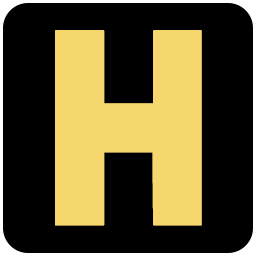
<style>
.page{position:relative;width:256px;height:256px;background:#000000}
.page>*{position:absolute;margin:0}
.t1{font:279px "Gabato";letter-spacing:-0.01em;color:#f5d76e}
</style>
<div class="page">
<p class="t1" style="left:55px;top:30px;width:147px;height:196px">H</p>
</div>
